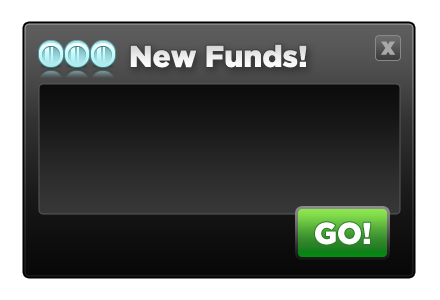
<style>
.page{position:relative;width:440px;height:300px;background:#ffffff}
.page>*{position:absolute;margin:0}
.t1{font:24px "Gotham-Black";color:#a8a8a8}
.t2{font:30px "Gotham-Black";color:#ffffff}
</style>
<div class="page">
<p class="t1" style="left:381px;top:41px;width:14px;height:14px">x</p>
<p class="t2" style="left:130px;top:44px;width:177px;height:24px">New Funds!</p>
<p class="t2" style="left:315px;top:222px;width:56px;height:23px">GO!</p>
</div>
